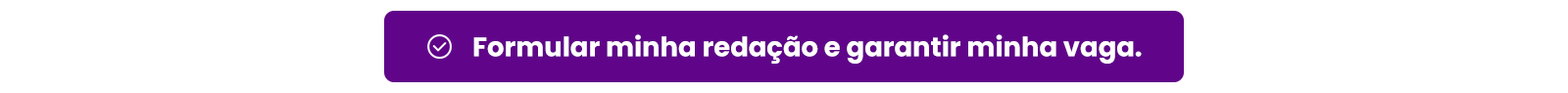
<style>
.page{position:relative;width:1568px;height:93px;background:#ffffff}
.page>*{position:absolute;margin:0}
.t1{font:26.9px "Poppins-Bold";color:#ffffff}
</style>
<div class="page">
<p class="t1" style="left:473px;top:34px;width:669px;height:30px">Formular minha redação e garantir minha vaga.</p>
</div>
